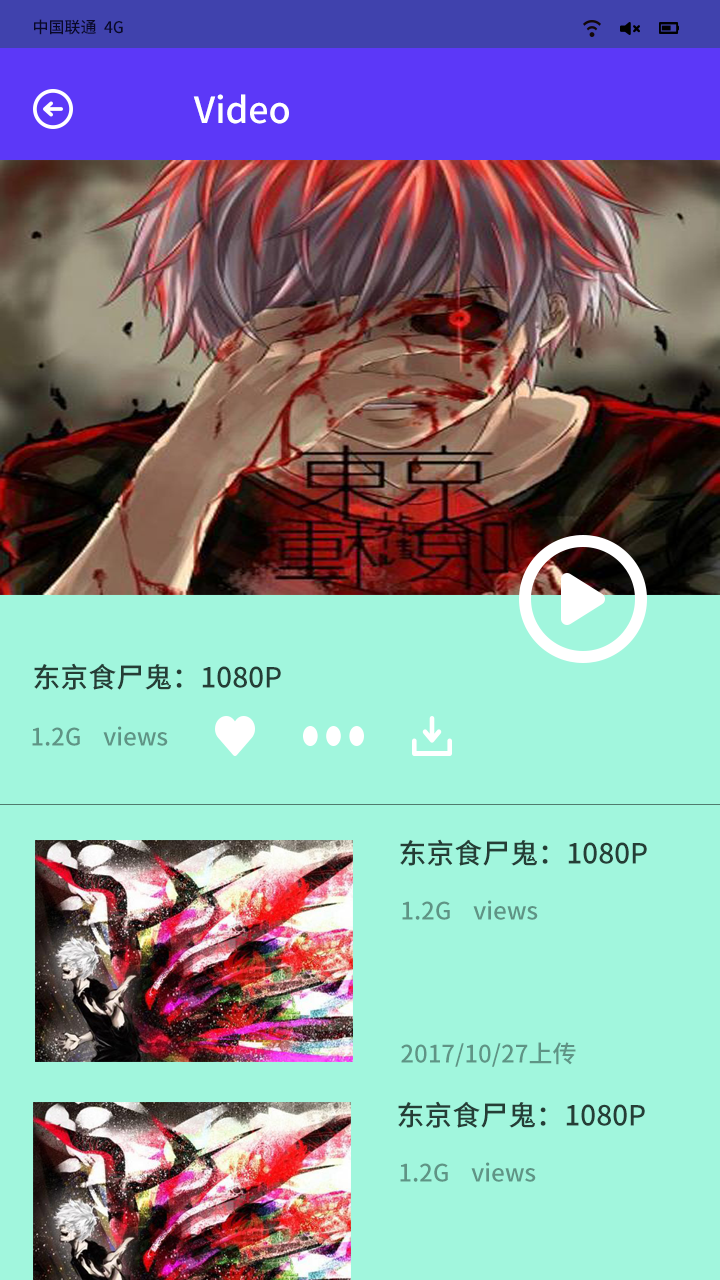
<style>
.page{position:relative;width:720px;height:1280px;background:#a1f6dd}
.page>*{position:absolute;margin:0}
.t1{font:16px "SourceHanSansCN-Medium";color:#090928}
.t2{font:36px "SourceHanSansCN-Medium";color:#ffffff}
.t3{font:28px "SourceHanSansCN-Medium";color:#253e36}
.t4{font:24px "SourceHanSansCN-Medium";color:#5f9485}
</style>
<div class="page">
<p class="t1" style="left:34px;top:19px;width:89px;height:16px">中国联通  4G</p>
<p class="t2" style="left:193px;top:94px;width:96px;height:30px">Video</p>
<p class="t3" style="left:34px;top:663px;width:247px;height:27px">东京食尸鬼：1080P</p>
<p class="t4" style="left:32px;top:726px;width:136px;height:20px">1.2G    views</p>
<p class="t3" style="left:400px;top:839px;width:247px;height:27px">东京食尸鬼：1080P</p>
<p class="t4" style="left:402px;top:900px;width:136px;height:20px">1.2G    views</p>
<p class="t4" style="left:401px;top:1042px;width:175px;height:25px">2017/10/27上传</p>
<p class="t3" style="left:398px;top:1101px;width:247px;height:27px">东京食尸鬼：1080P</p>
<p class="t4" style="left:400px;top:1162px;width:136px;height:20px">1.2G    views</p>
</div>
